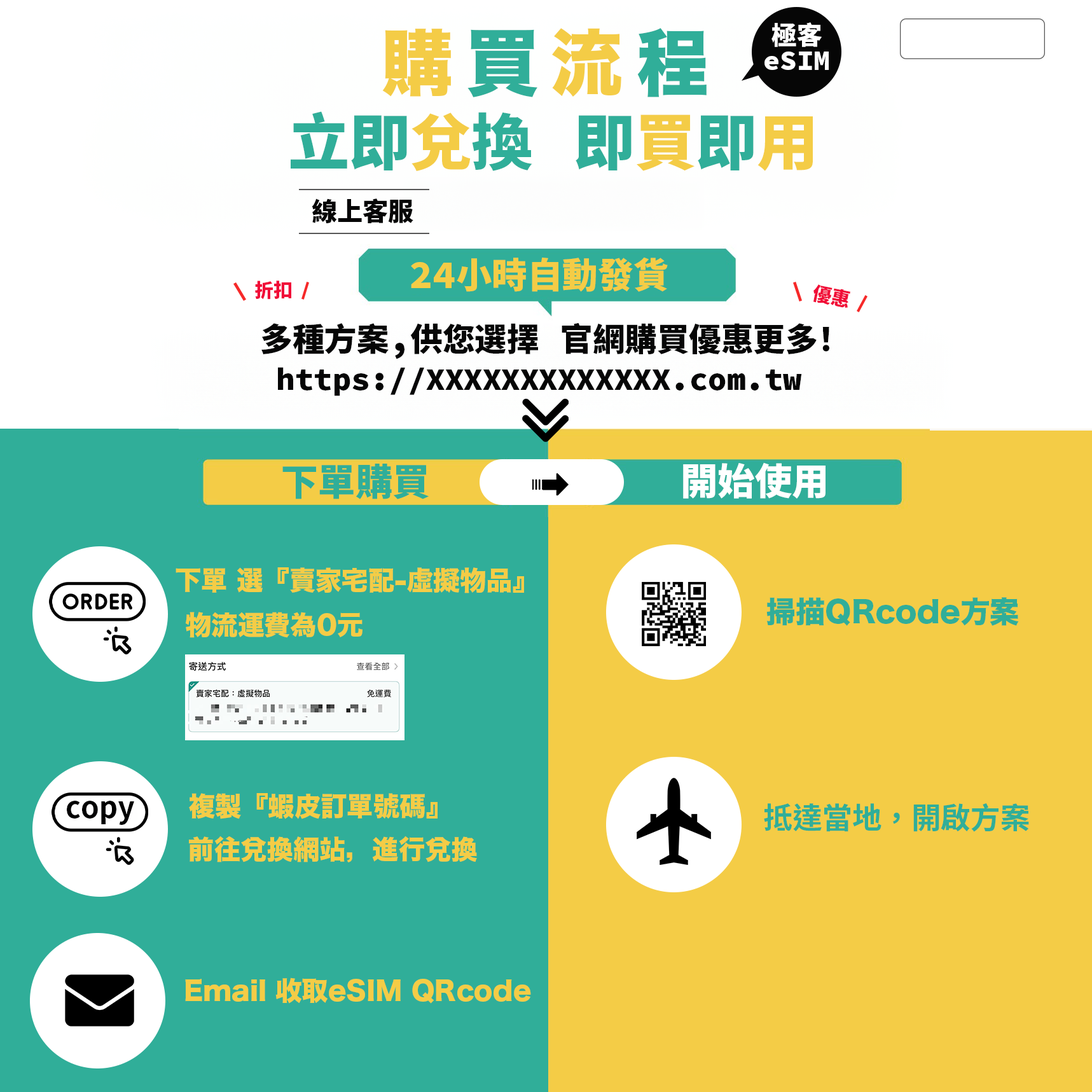
<style>
.page{position:relative;width:1092px;height:1092px;background:#f4cc46}
.page>*{position:absolute;margin:0}
.t1{font:72.1px "HiraKakuStdN-W8";color:#f4cc46}
.t2{font:72.1px "HiraKakuStdN-W8";color:#30ae99}
.t3{font:25.2px "SourceHanMonoSC-Heavy";color:#ffffff}
.t4{font:61.2px "SourceHanMonoSC-Heavy";color:#30ae99}
.t5{font:61.2px "SourceHanMonoSC-Heavy";color:#f4cc46}
.t6{font:25.5px "SourceHanMonoSC-Heavy";color:#060606}
.t7{font:35.5px "SourceHanMonoSC-Heavy";color:#f4cc46}
.t8{font:18.9px "SourceHanMonoSC-Heavy";color:#f10d38}
.t9{font:32.2px "SourceHanMonoSC-Heavy";color:#060606}
.t10{font:28.2px "SourceHanMonoSC-Heavy";color:#060606}
.t11{font:37.1px "SourceHanMonoSC-Heavy";color:#30ae99}
.t12{font:37.1px "SourceHanMonoSC-Heavy";color:#ffffff}
.t13{font:26.4px "HiraKakuStdN-W8";color:#f4cc46}
.t14{font:29.7px "HiraKakuStdN-W8";color:#30ae99}
.t15{font:29px "SourceHanSansTC-Bold";color:#000000}
.t16{font:29.7px "SourceHanSansTC-Bold";color:#30ae99}
</style>
<div class="page">
<p class="t1" style="left:382px;top:29px;width:69px;height:68px">購</p>
<p class="t2" style="left:467px;top:29px;width:70px;height:68px">買</p>
<p class="t1" style="left:552px;top:28px;width:69px;height:69px">流</p>
<p class="t2" style="left:637px;top:28px;width:70px;height:69px">程</p>
<p class="t3" style="left:771px;top:22px;width:51px;height:25px">極客</p>
<p class="t3" style="left:764px;top:52px;width:65px;height:18px">eSIM</p>
<p class="t4" style="left:291px;top:111px;width:522px;height:60px">立即<span class="t5">兌</span>換 即<span class="t5">買</span>即<span class="t5">用</span></p>
<p class="t6" style="left:312px;top:198px;width:101px;height:25px">線上客服</p>
<p class="t7" style="left:411px;top:257px;width:257px;height:35px">24小時自動發貨</p>
<p class="t8" style="left:255px;top:280px;width:36px;height:20px">折扣</p>
<p class="t8" style="left:813px;top:284px;width:37px;height:24px;rotate:11deg">優惠</p>
<p class="t9" style="left:261px;top:322px;width:568px;height:37px">多種方案,供您選擇 官網購買優惠更多！</p>
<p class="t10" style="left:278px;top:367px;width:524px;height:29px">https://XXXXXXXXXXXXX.com.tw</p>
<p class="t11" style="left:282px;top:464px;width:147px;height:35px">下單購買</p>
<p class="t12" style="left:683px;top:462px;width:143px;height:37px">開始使用</p>
<p class="t13" style="left:176px;top:567px;width:348px;height:26px">下單 選『賣家宅配-虛擬物品』</p>
<p class="t14" style="left:766px;top:597px;width:253px;height:29px">掃描QRcode方案</p>
<p class="t13" style="left:185px;top:612px;width:178px;height:26px">物流運費為0元</p>
<p class="t13" style="left:189px;top:793px;width:249px;height:26px">複製『蝦皮訂單號碼』</p>
<p class="t15" style="left:67px;top:801px;width:67px;height:24px">copy</p>
<p class="t16" style="left:764px;top:803px;width:265px;height:29px">抵達當地，開啟方案</p>
<p class="t13" style="left:189px;top:836px;width:288px;height:26px">前往兌換網站，進行兌換</p>
<p class="t13" style="left:185px;top:978px;width:346px;height:26px">Email 收取eSIM QRcode</p>
</div>
